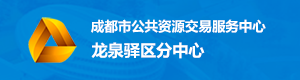
<style>
.page{position:relative;width:300px;height:80px}
.page>*{position:absolute;margin:0}
.t1{font:13.4px "MicrosoftYaHei-Bold";color:#ffffff}
.t2{font:16.1px "MicrosoftYaHei-Bold";color:#ffffff}
</style>
<div class="page">
<p class="t1" style="left:91px;top:19px;width:175px;height:14px">成都市公共资源交易服务中心</p>
<p class="t2" style="left:91px;top:42px;width:114px;height:17px">龙泉驿区分中心</p>
</div>
